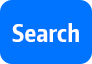
<style>
.page{position:relative;width:92px;height:64px;background:#0074ff}
.page>*{position:absolute;margin:0}
.t1{font:24px "EncodeSansCompressed-Bold";letter-spacing:0.015em;color:#ffffff}
</style>
<div class="page">
<p class="t1" style="left:12px;top:23px;width:67px;height:19px">Search</p>
</div>
